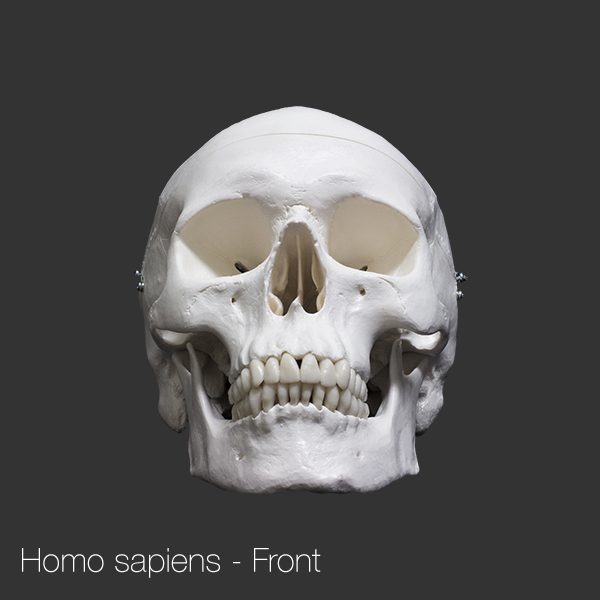
<style>
.page{position:relative;width:600px;height:600px;background:#333333}
.page>*{position:absolute;margin:0}
.t1{font:33.3px "HelveticaNeue-Thin";color:#ffffff}
</style>
<div class="page">
<p class="t1" style="left:22px;top:548px;width:299px;height:30px">Homo sapiens - Front</p>
</div>
